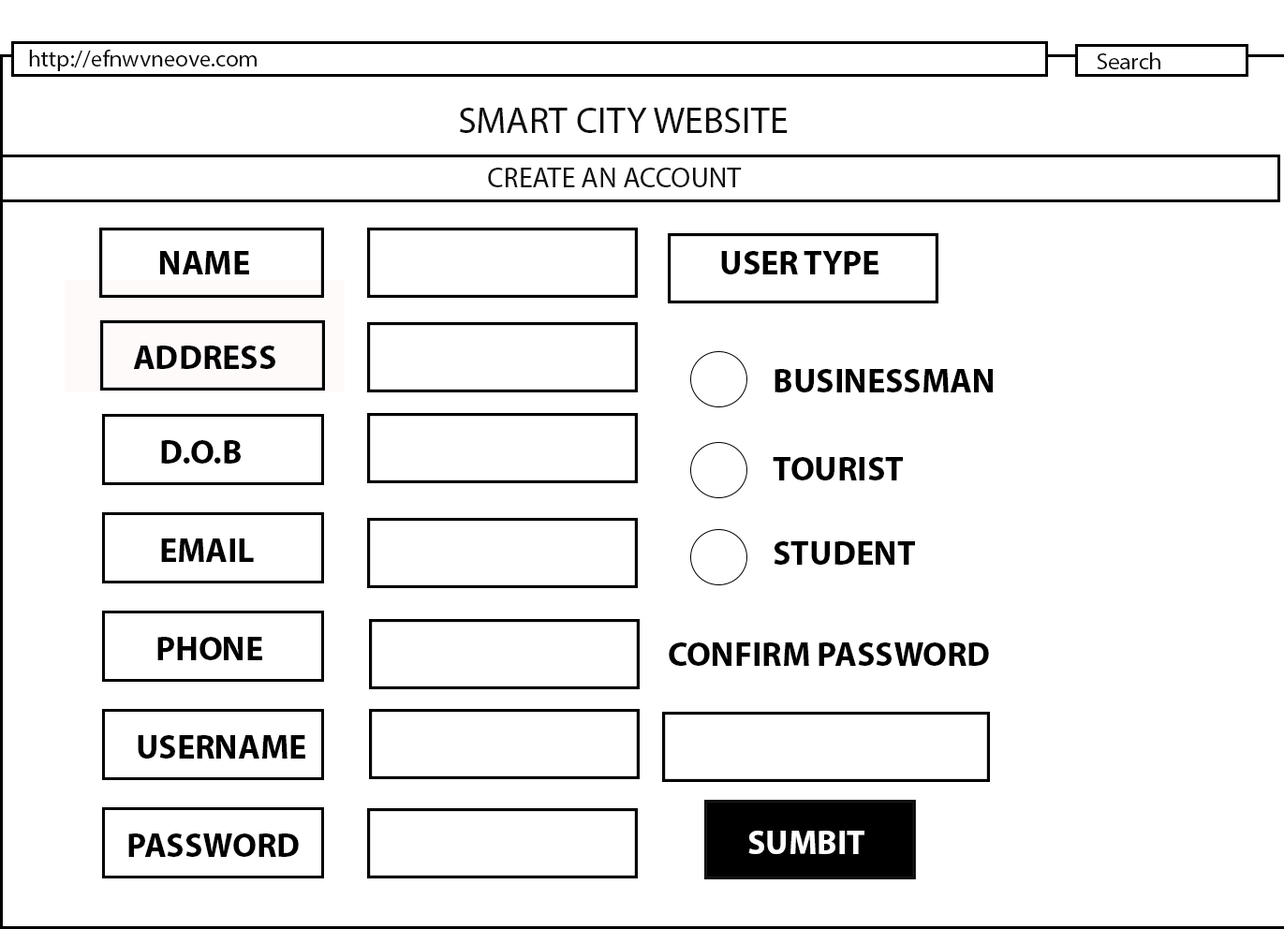
<style>
.page{position:relative;width:1284px;height:929px;background:#ffffff}
.page>*{position:absolute;margin:0}
.t1{font:23.4px "MyriadPro-Regular";color:#0e0d0c}
.t2{font:37.5px "MyriadPro-Regular";color:#0e0d0c}
.t3{font:28.1px "MyriadPro-Regular";color:#0e0d0c}
.t4{font:33.7px "MyriadPro-Bold";color:#010101}
.t5{font:33.7px "MyriadPro-Bold";color:#000000}
.t6{font:33.7px "MyriadPro-Bold";color:#fdfdfd}
</style>
<div class="page">
<p class="t1" style="left:29px;top:50px;width:228px;height:21px">http://efnwvneove.com</p>
<p class="t1" style="left:1096px;top:52px;width:64px;height:17px">Search</p>
<p class="t2" style="left:460px;top:108px;width:327px;height:25px">SMART CITY WEBSITE</p>
<p class="t3" style="left:488px;top:168px;width:254px;height:19px">CREATE AN ACCOUNT</p>
<p class="t4" style="left:160px;top:251px;width:89px;height:23px">NAME</p>
<p class="t5" style="left:721px;top:251px;width:157px;height:23px">USER TYPE</p>
<p class="t4" style="left:133px;top:346px;width:142px;height:23px">ADDRESS</p>
<p class="t5" style="left:774px;top:369px;width:219px;height:23px">BUSINESSMAN</p>
<p class="t5" style="left:772px;top:457px;width:131px;height:23px">TOURIST</p>
<p class="t5" style="left:773px;top:541px;width:142px;height:24px">STUDENT</p>
<p class="t5" style="left:669px;top:642px;width:320px;height:24px">CONFIRM PASSWORD</p>
<p class="t6" style="left:748px;top:831px;width:116px;height:23px">SUMBIT</p>
</div>
